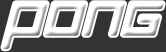
<style>
.page{position:relative;width:166px;height:52px;background:#333333}
.page>*{position:absolute;margin:0}
.t1{font:60px "RazerOblique"}
</style>
<div class="page">
<p class="t1" style="left:2px;top:2px;width:162px;height:48px">PONG</p>
</div>
